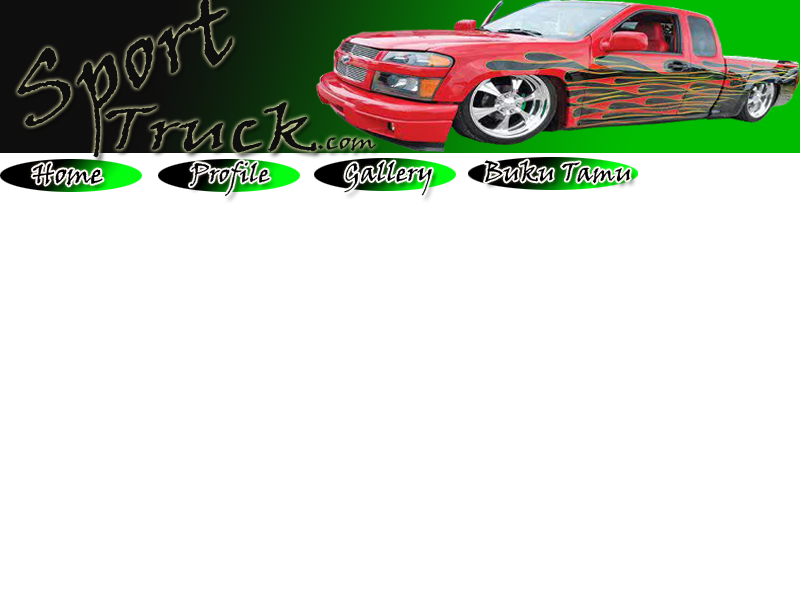
<style>
.page{position:relative;width:800px;height:600px;background:#ffffff}
.page>*{position:absolute;margin:0}
.t1{font:22.9px "VinerHandITC";color:#0f0e0e;scale:1.26 1}
.t2{font:25.4px "VinerHandITC";color:#0f0e0e}
.t3{font:25.4px "VinerHandITC";color:#000000}
.t4{font:27.9px "VinerHandITC";color:#000000}
</style>
<div class="page">
<p class="t1" style="left:318px;top:137px;width:58px;height:14px">.com</p>
<p class="t2" style="left:190px;top:161px;width:80px;height:35px">Profile</p>
<p class="t3" style="left:344px;top:161px;width:88px;height:35px">Gallery</p>
<p class="t3" style="left:484px;top:160px;width:147px;height:24px">Buku Tamu</p>
<p class="t4" style="left:32px;top:163px;width:71px;height:23px">Home</p>
</div>
